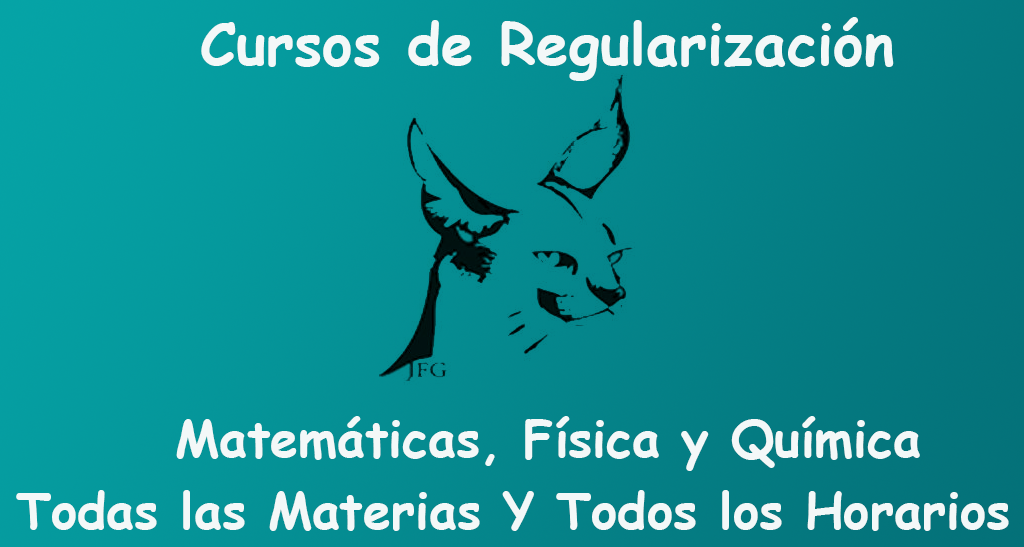
<style>
.page{position:relative;width:1024px;height:547px}
.page>*{position:absolute;margin:0}
.t1{font:58.3px "ComicSansMS-Bold";color:#f3f8f8}
.t2{font:12px "ComicSansMS-Bold";color:#f3f8f8}
</style>
<div class="page">
<p class="t1" style="left:201px;top:17px;width:693px;height:64px">Cursos de Regularización</p>
<p class="t2" style="left:176px;top:416px;width:744px;height:55px">Matemáticas, Física y Química</p>
<p class="t2" style="left:16px;top:490px;width:993px;height:41px">Todas las Materias Y Todos los Horarios</p>
</div>
